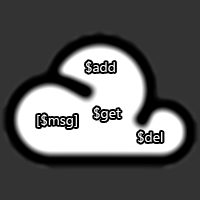
<style>
.page{position:relative;width:200px;height:200px;background:#333333}
.page>*{position:absolute;margin:0}
.t1{font:14px "SegoeUI";color:#ffffff}
</style>
<div class="page">
<p class="t1" style="left:86px;top:61px;width:29px;height:12px">$add</p>
<p class="t1" style="left:94px;top:107px;width:27px;height:14px">$get</p>
<p class="t1" style="left:37px;top:114px;width:40px;height:14px">[$msg]</p>
<p class="t1" style="left:138px;top:131px;width:25px;height:12px">$del</p>
</div>
